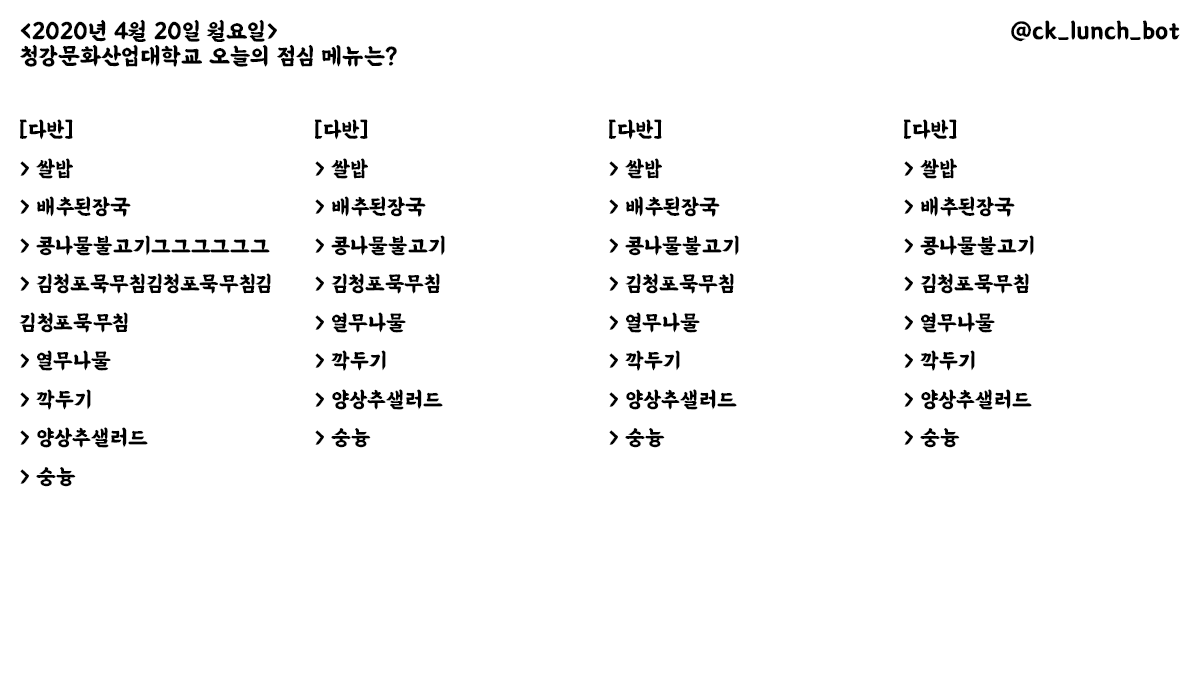
<style>
.page{position:relative;width:1200px;height:700px;background:#ffffff}
.page>*{position:absolute;margin:0}
.t1{font:24px "BMEULJIRO";color:#000000}
.t2{font:22px "BMEULJIRO";color:#000000}
</style>
<div class="page">
<p class="t1" style="left:20px;top:19px;width:257px;height:23px">&lt;2020년 4월 20일 월요일&gt;</p>
<p class="t1" style="left:1011px;top:20px;width:169px;height:22px">@ck_lunch_bot</p>
<p class="t1" style="left:20px;top:44px;width:377px;height:24px">청강문화산업대학교 오늘의 점심 메뉴는?</p>
<p class="t2" style="left:19px;top:119px;width:252px;height:368px">[다반]<br>&gt; 쌀밥<br>&gt; 배추된장국<br>&gt; 콩나물불고기그그그그그그<br>&gt; 김청포묵무침김청포묵무침김<br>김청포묵무침<br>&gt; 열무나물<br>&gt; 깍두기<br>&gt; 양상추샐러드<br>&gt; 숭늉</p>
<p class="t2" style="left:314px;top:119px;width:131px;height:329px">[다반]<br>&gt; 쌀밥<br>&gt; 배추된장국<br>&gt; 콩나물불고기    <br>&gt; 김청포묵무침<br>&gt; 열무나물<br>&gt; 깍두기<br>&gt; 양상추샐러드<br>&gt; 숭늉</p>
<p class="t2" style="left:608px;top:119px;width:131px;height:329px">[다반]<br>&gt; 쌀밥<br>&gt; 배추된장국<br>&gt; 콩나물불고기    <br>&gt; 김청포묵무침<br>&gt; 열무나물<br>&gt; 깍두기<br>&gt; 양상추샐러드<br>&gt; 숭늉</p>
<p class="t2" style="left:903px;top:119px;width:131px;height:329px">[다반]<br>&gt; 쌀밥<br>&gt; 배추된장국<br>&gt; 콩나물불고기    <br>&gt; 김청포묵무침<br>&gt; 열무나물<br>&gt; 깍두기<br>&gt; 양상추샐러드<br>&gt; 숭늉</p>
</div>
